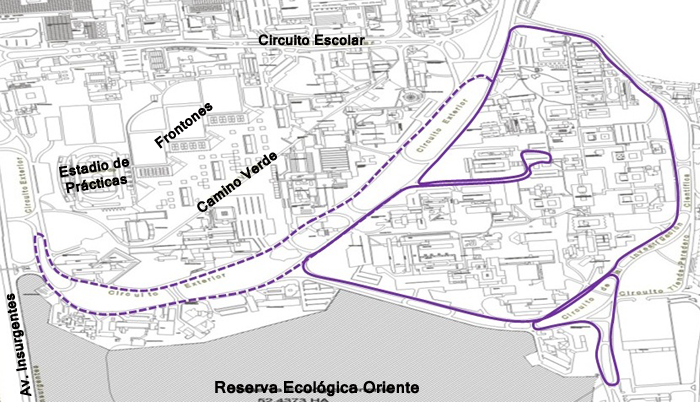
<style>
.page{position:relative;width:700px;height:402px;background:#ffffff}
.page>*{position:absolute;margin:0}
.t1{font:14px "Kartika-Bold";color:#030000}
.t2{font:16px "Kartika-Bold";color:#030000}
</style>
<div class="page">
<p class="t1" style="left:258px;top:34px;width:107px;height:12px">Circuito Escolar</p>
<p class="t1" style="left:154px;top:103px;width:59px;height:46px;rotate:-37deg">Frontones</p>
<p class="t1" style="left:59px;top:157px;width:70px;height:37px;rotate:-9deg">Estadio de<br> Prácticas</p>
<p class="t1" style="left:197px;top:152px;width:80px;height:60px;rotate:-36deg">Camino Verde</p>
<p class="t1" style="left:7px;top:293px;width:25px;height:103px;rotate:-100deg">Av. Insurgentes</p>
<p class="t2" style="left:215px;top:380px;width:204px;height:17px">Reserva Ecológica Oriente</p>
</div>
